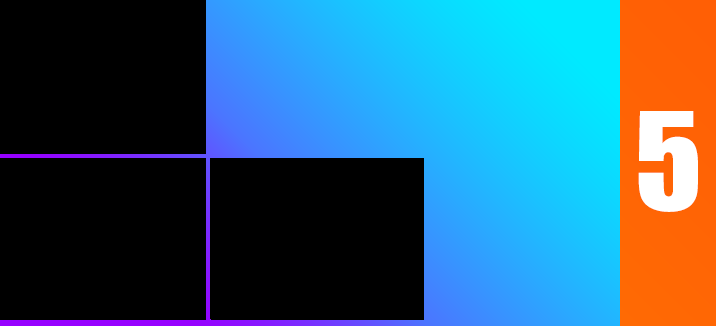
<style>
.page{position:relative;width:716px;height:326px;background:#000000}
.page>*{position:absolute;margin:0}
.t1{font:125px "Impact";color:#ffffff}
</style>
<div class="page">
<p class="t1" style="left:638px;top:111px;width:60px;height:101px">5</p>
</div>
